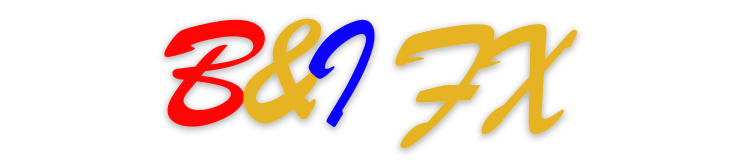
<style>
.page{position:relative;width:742px;height:160px;background:#ffffff}
.page>*{position:absolute;margin:0}
.t1{font:160px "BrushScriptMT";letter-spacing:-0.075em;color:#e6b422}
.t2{font:160px "BrushScriptMT";letter-spacing:-0.075em;color:#ff0505}
.t3{font:160px "BrushScriptMT";letter-spacing:-0.075em;color:#0c00ff}
</style>
<div class="page">
<p class="t1" style="left:164px;top:18px;width:413px;height:131px"><span class="t2">B</span>&amp;<span class="t3">I </span>FX</p>
</div>
